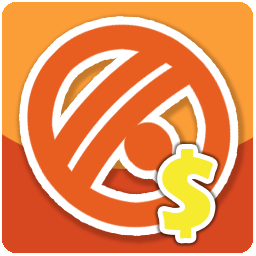
<style>
.page{position:relative;width:256px;height:256px;background:#e85e21}
.page>*{position:absolute;margin:0}
.t1{font:120px "BerlinSansFBDemi-Bold";color:#f7eb30}
</style>
<div class="page">
<p class="t1" style="left:162px;top:149px;width:51px;height:90px">$</p>
</div>
